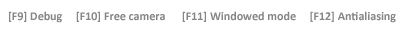
<style>
.page{position:relative;width:413px;height:30px;background:#ffffff}
.page>*{position:absolute;margin:0}
.t1{font:12px "Calibri-Bold";color:#868686}
</style>
<div class="page">
<p class="t1" style="left:9px;top:11px;width:387px;height:12px">[F9] Debug     [F10] Free camera      [F11] Windowed mode     [F12] Antialiasing</p>
</div>
